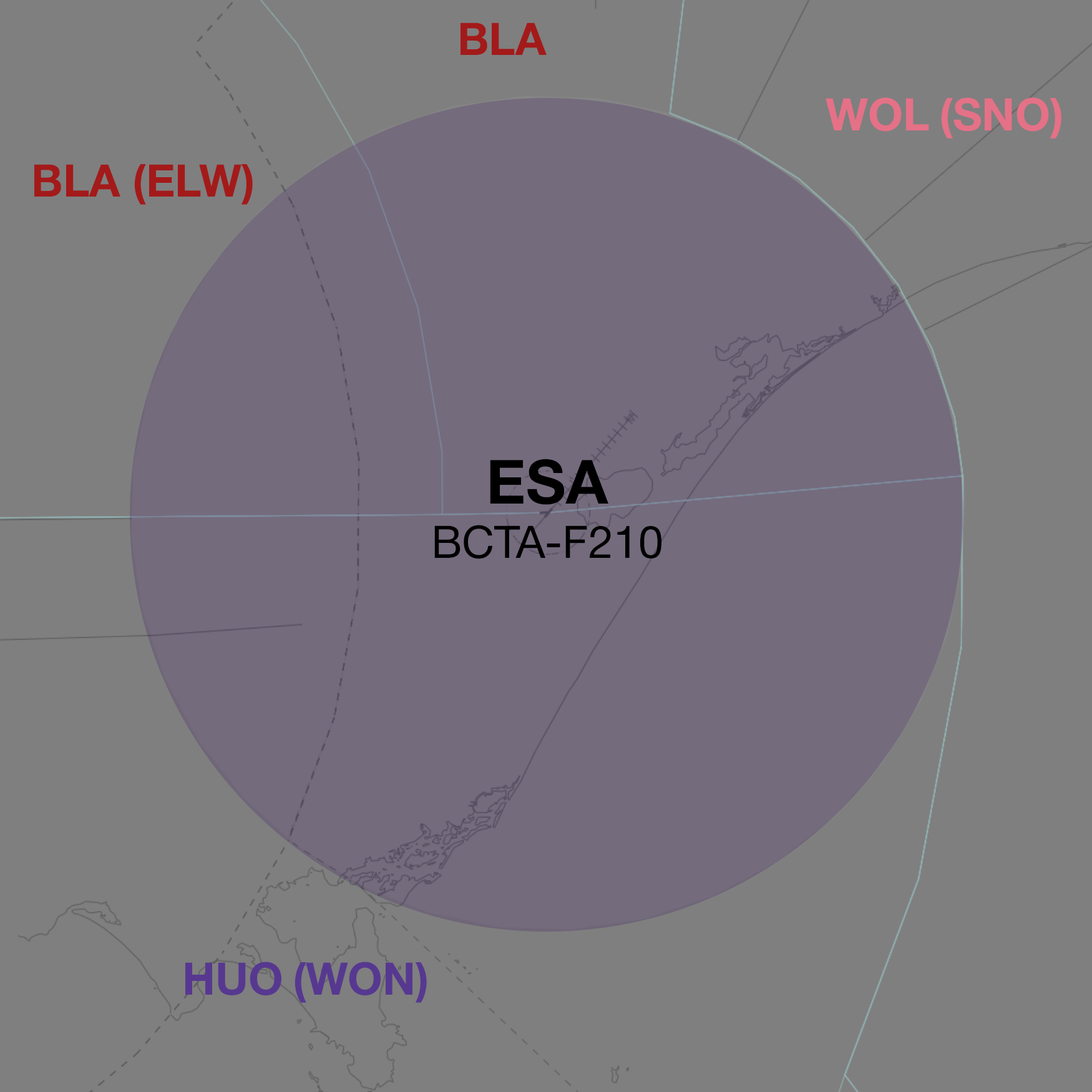
<style>
.page{position:relative;width:1092px;height:1092px;background:#7f7f7f}
.page>*{position:absolute;margin:0}
.t1{font:44.9px "HelveticaNeue-Bold";color:#a31a1a}
.t2{font:44.9px "HelveticaNeue-Bold";color:#e57187}
.t3{font:44.9px "HelveticaNeue-Roman";color:#000000}
.t4{font:61.2px "HelveticaNeue-Bold";color:#000000}
.t5{font:44.9px "HelveticaNeue-Bold";color:#573890}
</style>
<div class="page">
<p class="t1" style="left:461px;top:22px;width:86px;height:33px">BLA</p>
<p class="t2" style="left:826px;top:97px;width:235px;height:42px">WOL (SNO)</p>
<p class="t1" style="left:34px;top:164px;width:219px;height:41px">BLA (ELW)</p>
<p class="t3" style="left:434px;top:459px;width:227px;height:100px;text-align:center"><span class="t4">ESA<br></span>BCTA-F210</p>
<p class="t5" style="left:185px;top:962px;width:242px;height:41px">HUO (WON)</p>
</div>
